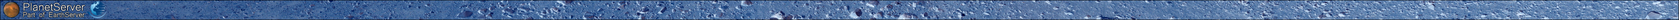
<style>
.page{position:relative;width:1679px;height:20px}
.page>*{position:absolute;margin:0}
.t1{font:9px/6.5px "Microsoft-Yi-Baiti";color:#ffffff}
.t2{font:14.3px/5.3px "Microsoft-Yi-Baiti";color:#ffffff}
</style>
<div class="page">
<p class="t1" style="left:23px;top:3px;width:62px;height:15px"><span class="t2">PlanetServer<br></span>Part of EarthServer</p>
</div>
